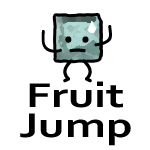
<style>
.page{position:relative;width:150px;height:150px;background:#ffffff}
.page>*{position:absolute;margin:0}
.t1{font:36px/30px "Corbel-Bold";color:#000000;scale:1.34 1}
</style>
<div class="page">
<p class="t1" style="left:20px;top:81px;width:111px;height:65px;text-align:center">Fruit Jump</p>
</div>
